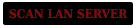
<style>
.page{position:relative;width:137px;height:28px;background:#010101}
.page>*{position:absolute;margin:0}
.t1{font:12px "DejaVuSerifCondensed-Bold";color:#820b0b}
</style>
<div class="page">
<p class="t1" style="left:9px;top:9px;width:119px;height:10px">SCAN LAN SERVER</p>
</div>
